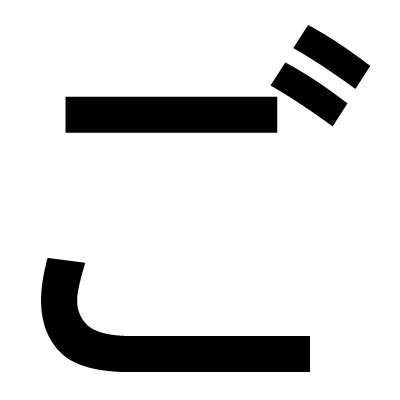
<style>
.page{position:relative;width:400px;height:400px;background:#ffffff}
.page>*{position:absolute;margin:0}
.t1{font:416.7px "MS-PGothic";color:#000000}
</style>
<div class="page">
<p class="t1" style="left:41px;top:25px;width:330px;height:347px">ご</p>
</div>
